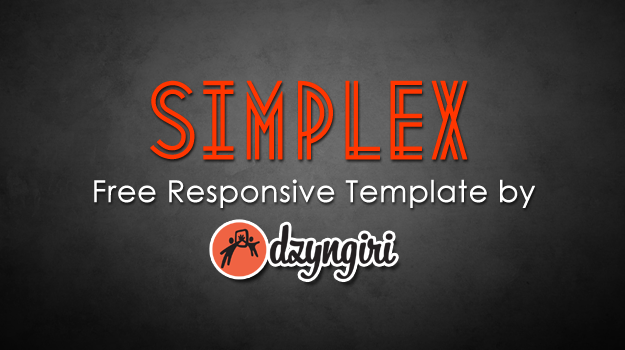
<style>
.page{position:relative;width:625px;height:350px}
.page>*{position:absolute;margin:0}
.t1{font:97.3px "Metropolis1920";color:#ff3600;font-weight:bold}
.t2{font:30px "CenturyGothic";color:#ffffff;font-weight:bold}
</style>
<div class="page">
<p class="t1" style="left:150px;top:80px;width:318px;height:80px">SIMPLEX</p>
<p class="t2" style="left:94px;top:179px;width:441px;height:29px">Free Responsive Template by</p>
</div>
